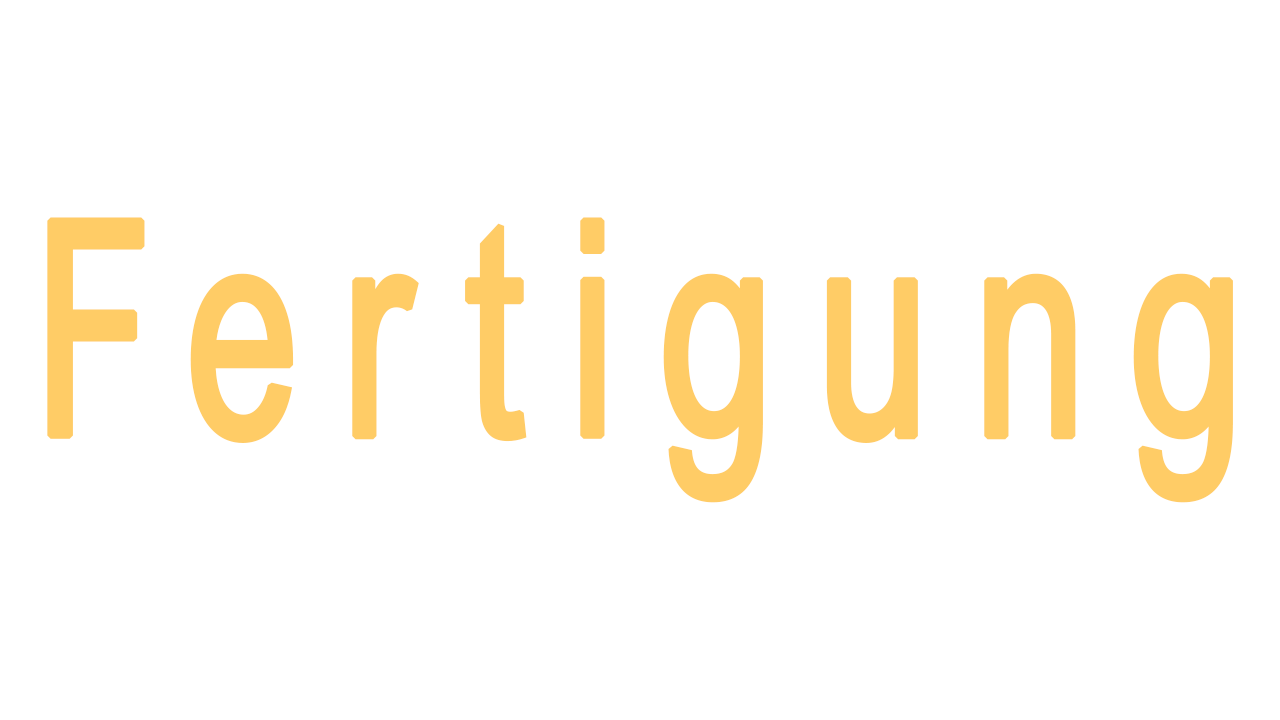
<style>
.page{position:relative;width:1280px;height:720px;background:#ffffff}
.page>*{position:absolute;margin:0}
.t1{font:300px "ArialNova";letter-spacing:0.2em;color:#ffcc66;font-weight:bold;scale:0.67 1}
</style>
<div class="page">
<p class="t1" style="left:47px;top:217px;width:1186px;height:286px">Fertigung</p>
</div>
